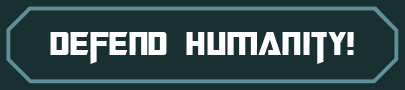
<style>
.page{position:relative;width:405px;height:90px;background:#193033}
.page>*{position:absolute;margin:0}
.t1{font:36px "TransformersMovie";letter-spacing:0.02em;color:#ffffff}
.t2{font:36px "TransformersMovie";letter-spacing:0.04em;color:#ffffff}
</style>
<div class="page">
<p class="t1" style="left:50px;top:32px;width:304px;height:32px">defend <span class="t2">hu</span>ma<span class="t2">ni</span>ty!</p>
</div>
